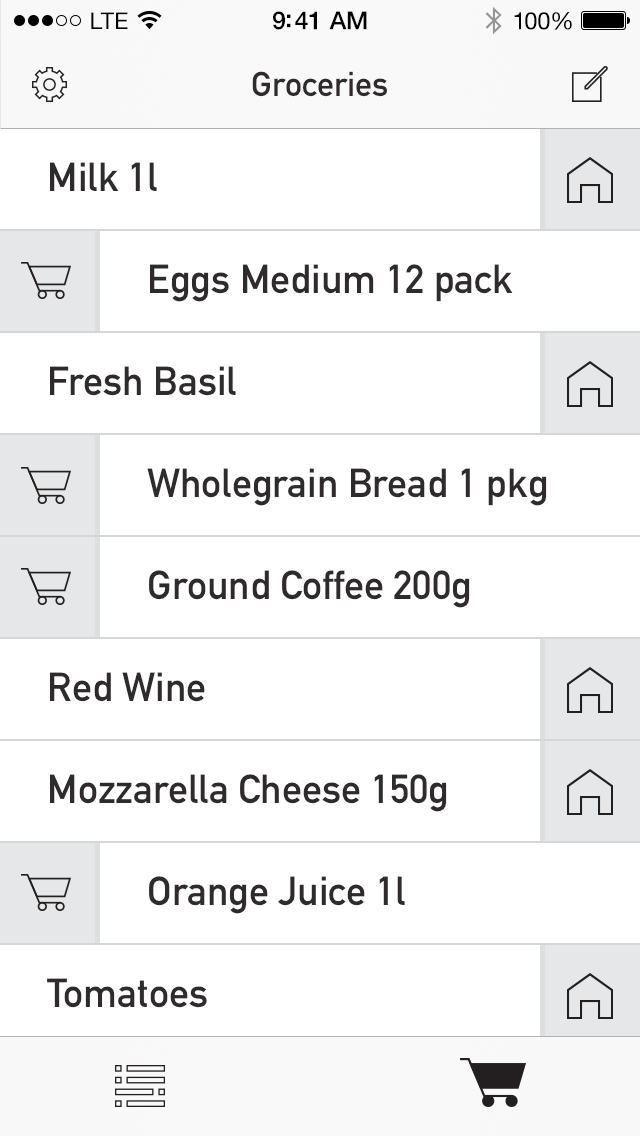
<style>
.page{position:relative;width:640px;height:1136px;background:#ffffff}
.page>*{position:absolute;margin:0}
.t1{font:23px "HelveticaNeue";letter-spacing:0.02em;color:#000000}
.t2{font:25px "HelveticaNeue-Medium";letter-spacing:-0.02em;color:#000000}
.t3{font:24px "HelveticaNeue";letter-spacing:-0.02em;color:#010101}
.t4{font:34px "DINAlternate-Bold";color:#2f2b2c}
.t5{font:40px "DINAlternate-Bold";color:#2f2b2c}
</style>
<div class="page">
<p class="t1" style="left:91px;top:12px;width:37px;height:17px">LTE</p>
<p class="t2" style="left:273px;top:11px;width:94px;height:19px">9:41 AM</p>
<p class="t3" style="left:514px;top:12px;width:58px;height:18px">100%</p>
<p class="t4" style="left:252px;top:71px;width:135px;height:26px">Groceries</p>
<p class="t5" style="left:50px;top:162px;width:107px;height:29px">Milk 1l</p>
<p class="t5" style="left:150px;top:264px;width:363px;height:38px">Eggs Medium 12 pack</p>
<p class="t5" style="left:50px;top:366px;width:186px;height:30px">Fresh Basil</p>
<p class="t5" style="left:147px;top:468px;width:400px;height:38px">Wholegrain Bread 1 pkg</p>
<p class="t5" style="left:149px;top:570px;width:321px;height:38px">Ground Coffee 200g</p>
<p class="t5" style="left:50px;top:672px;width:155px;height:30px">Red Wine</p>
<p class="t5" style="left:50px;top:774px;width:397px;height:38px">Mozzarella Cheese 150g</p>
<p class="t5" style="left:149px;top:876px;width:256px;height:38px">Orange Juice 1l</p>
<p class="t5" style="left:47px;top:978px;width:160px;height:30px">Tomatoes</p>
</div>
